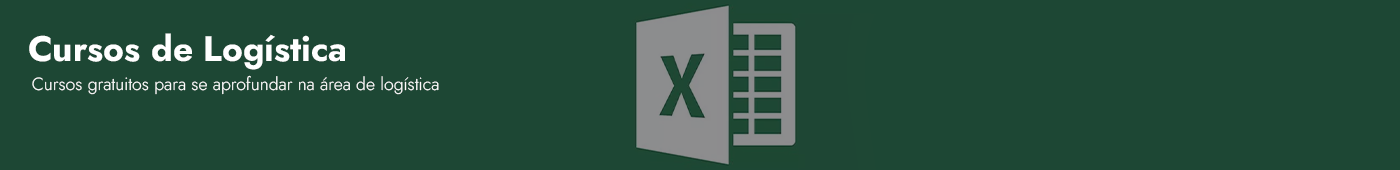
<style>
.page{position:relative;width:1400px;height:170px;background:#1d4734}
.page>*{position:absolute;margin:0}
.t1{font:35.3px "Jost-Bold";color:#ffffff}
.t2{font:17.6px "Jost-Light";color:#ffffff}
</style>
<div class="page">
<p class="t1" style="left:29px;top:33px;width:316px;height:37px">Cursos de Logística</p>
<p class="t2" style="left:32px;top:75px;width:407px;height:20px">Cursos gratuitos para se aprofundar na área de logística</p>
</div>
